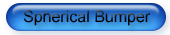
<style>
.page{position:relative;width:170px;height:35px}
.page>*{position:absolute;margin:0}
.t1{font:16px "ArialMT";color:#000000}
</style>
<div class="page">
<p class="t1" style="left:23px;top:10px;width:128px;height:16px">Spherical Bumper</p>
</div>
